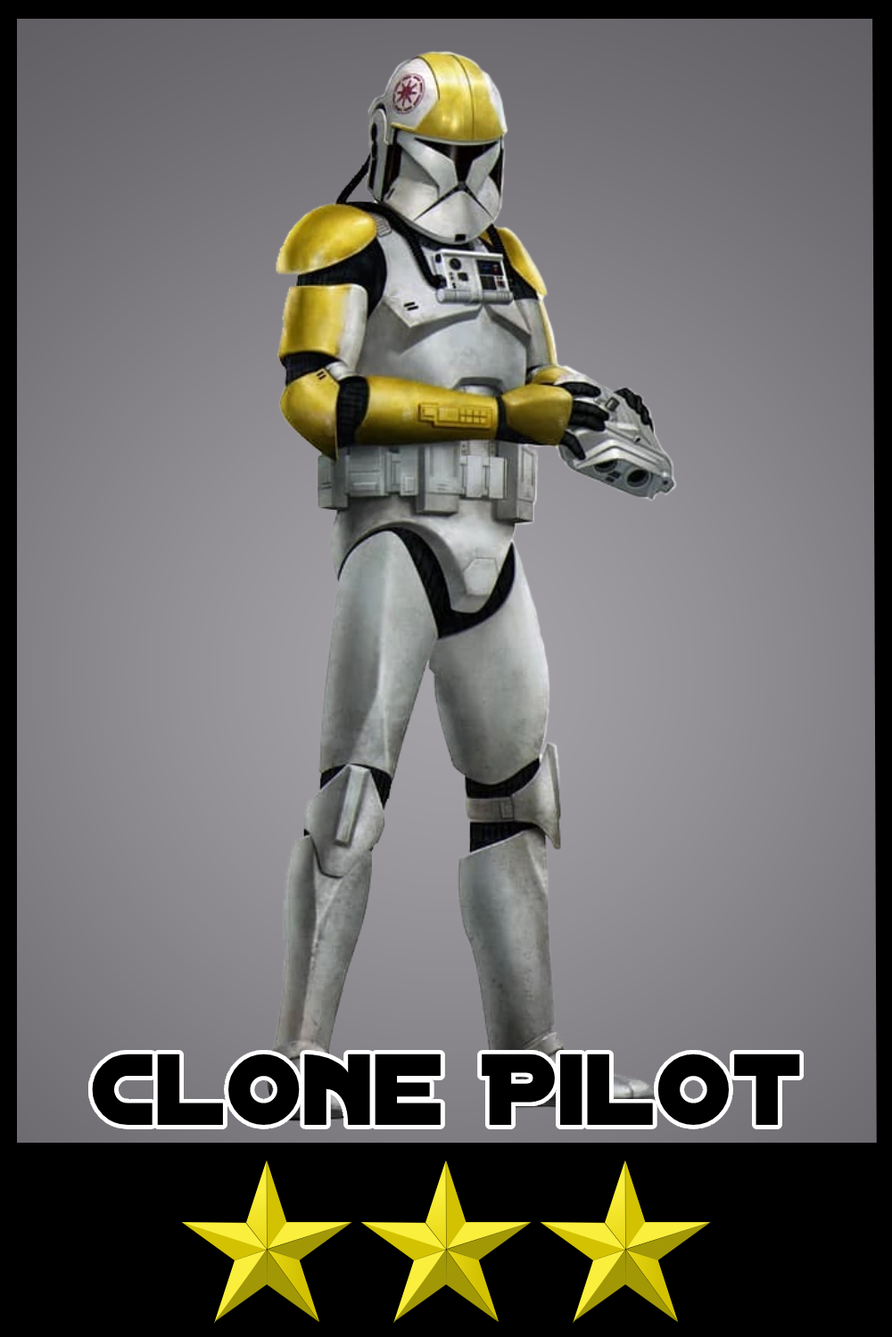
<style>
.page{position:relative;width:892px;height:1337px}
.page>*{position:absolute;margin:0}
.t1{font:108.7px "DistantGalaxy";color:#000000}
</style>
<div class="page">
<p class="t1" style="left:92px;top:1054px;width:708px;height:71px">Clone Pilot</p>
</div>
